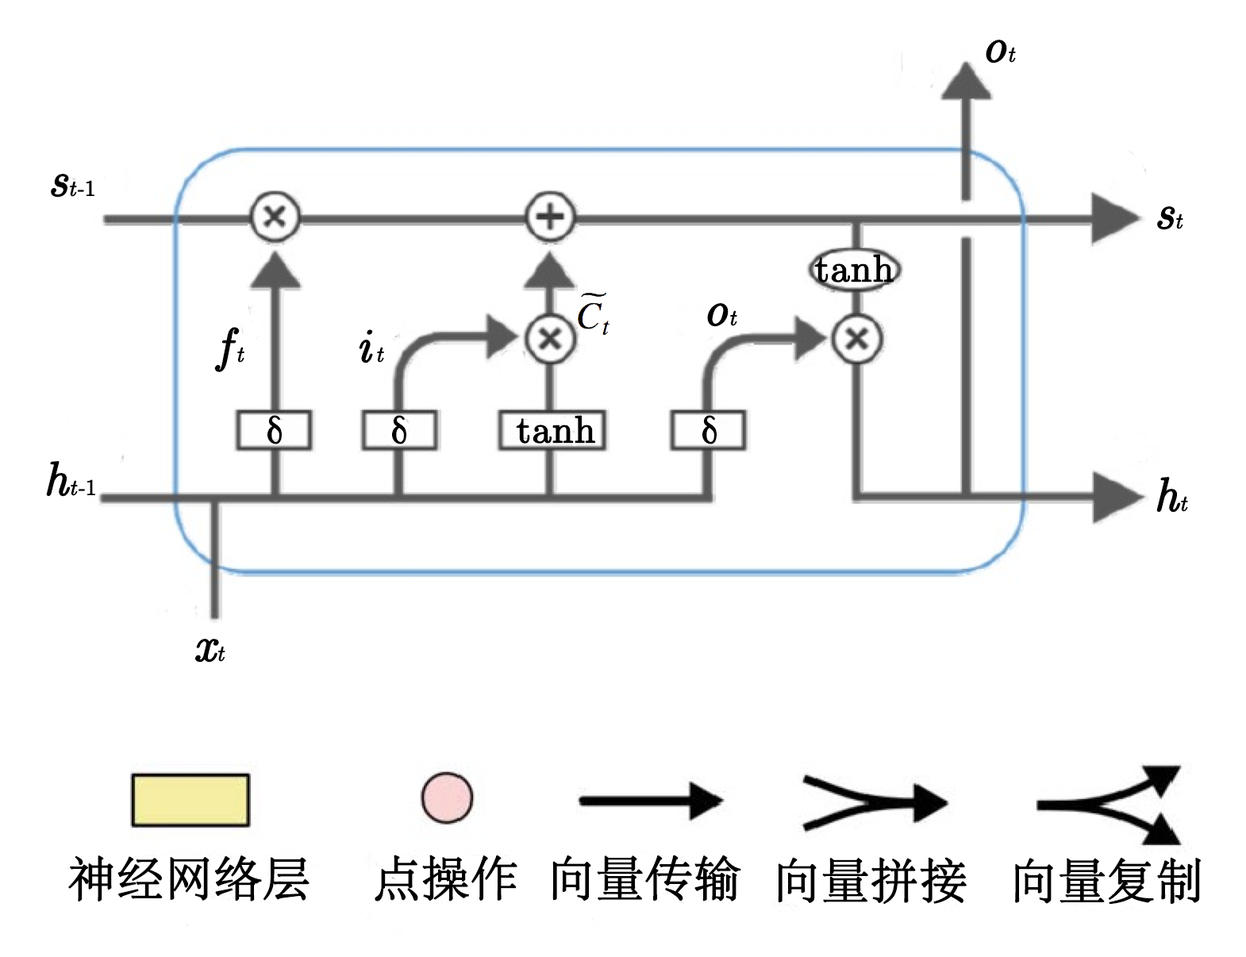
<style>
.page{position:relative;width:1246px;height:957px;background:#ffffff}
.page>*{position:absolute;margin:0}
.t1{font:47.6px "Euclid-Italic";color:#000000;font-weight:bold}
.t2{font:22.2px "Euclid-Italic";color:#000000;font-weight:bold}
.t3{font:22.2px "Euclid";color:#000000;font-weight:bold}
.t4{font:38.1px "Euclid";color:#000000;font-weight:bold}
.t5{font:38.1px "EuclidSymbol";color:#000000;font-weight:bold}
.t6{font:47.6px "STSong";color:#000000;font-weight:bold}
</style>
<div class="page">
<p class="t1" style="left:986px;top:40px;width:30px;height:23px">o<span class="t2">t</span></p>
<p class="t2" style="left:51px;top:174px;width:43px;height:24px"><span class="t1">s</span>t-<span class="t3">1</span></p>
<p class="t1" style="left:1157px;top:206px;width:26px;height:24px">s<span class="t2">t</span></p>
<p class="t4" style="left:814px;top:254px;width:80px;height:29px">tanh</p>
<p class="t1" style="left:707px;top:303px;width:30px;height:24px">o<span class="t2">t</span></p>
<p class="t1" style="left:214px;top:327px;width:30px;height:45px">f <span class="t2">t</span></p>
<p class="t1" style="left:359px;top:329px;width:25px;height:34px">i <span class="t2">t</span></p>
<p class="t5" style="left:267px;top:415px;width:15px;height:29px">d</p>
<p class="t5" style="left:392px;top:415px;width:14px;height:29px">d</p>
<p class="t4" style="left:516px;top:415px;width:79px;height:29px">tanh</p>
<p class="t5" style="left:702px;top:415px;width:15px;height:29px">d</p>
<p class="t2" style="left:46px;top:461px;width:49px;height:36px"><span class="t1">h</span>t-<span class="t3">1</span></p>
<p class="t1" style="left:1156px;top:477px;width:32px;height:36px">h<span class="t2">t</span></p>
<p class="t1" style="left:195px;top:639px;width:30px;height:24px">x<span class="t2">t</span></p>
<p class="t6" style="left:68px;top:855px;width:241px;height:47px">神经网络层</p>
<p class="t6" style="left:375px;top:855px;width:142px;height:47px">点操作</p>
<p class="t6" style="left:552px;top:855px;width:189px;height:47px">向量传输</p>
<p class="t6" style="left:778px;top:857px;width:189px;height:48px">向量拼接</p>
<p class="t6" style="left:1015px;top:857px;width:186px;height:48px">向量复制</p>
</div>
